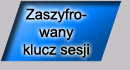
<style>
.page{position:relative;width:130px;height:70px;background:#c6c3c6}
.page>*{position:absolute;margin:0}
.t1{font:14.7px "ArialMT";color:#000000}
</style>
<div class="page">
<p class="t1" style="left:23px;top:8px;width:66px;height:50px;text-align:center">Zaszyfro-<br>wany<br>klucz sesji</p>
</div>
